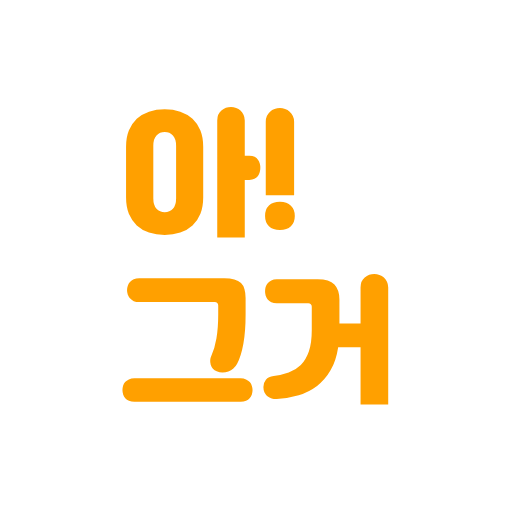
<style>
.page{position:relative;width:512px;height:512px;background:#ffffff}
.page>*{position:absolute;margin:0}
.t1{font:139px "Jalnan";color:#ffa000}
</style>
<div class="page">
<p class="t1" style="left:122px;top:107px;width:267px;height:298px">아!<br>그거</p>
</div>
